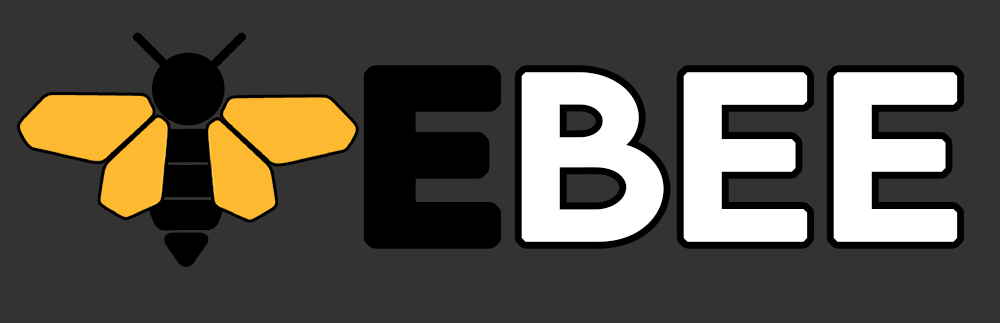
<style>
.page{position:relative;width:1000px;height:323px;background:#333333}
.page>*{position:absolute;margin:0}
.t1{font:206px "LEMONMILK-Regular";color:#ffffff;font-weight:bold;scale:1.2 1}
.t2{font:206px "LEMONMILK-Regular";color:#000000;font-weight:bold;scale:1.2 1}
</style>
<div class="page">
<p class="t1" style="left:370px;top:72px;width:588px;height:170px"><span class="t2">e</span>bee</p>
</div>
